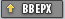
<style>
.page{position:relative;width:65px;height:19px;background:#8a8a8a}
.page>*{position:absolute;margin:0}
.t1{font:12px "MyriadPro-BoldCond";letter-spacing:0.05em;color:#ffffff}
</style>
<div class="page">
<p class="t1" style="left:23px;top:4px;width:29px;height:9px">ВВЕРХ</p>
</div>
